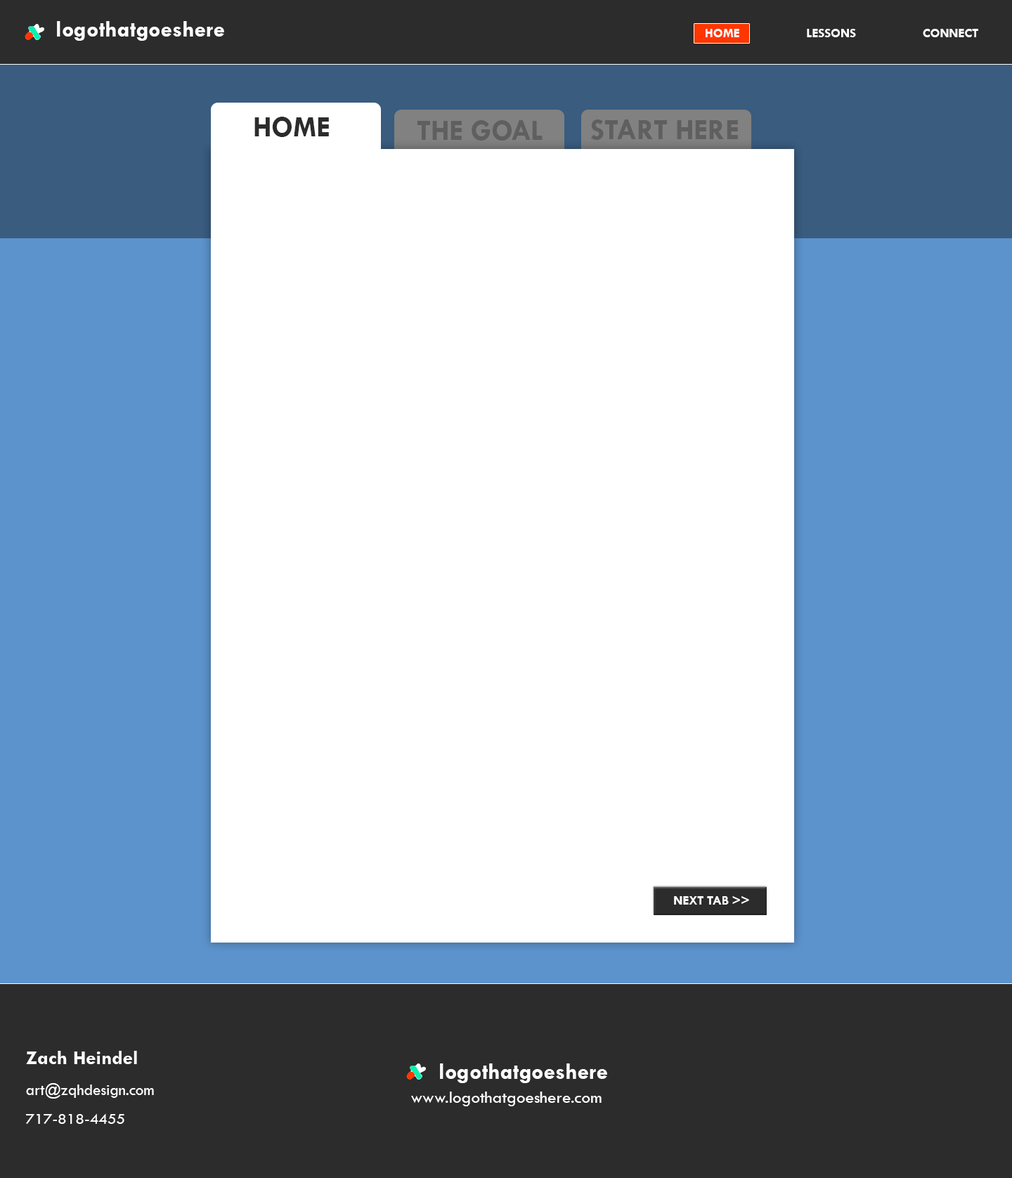
<style>
.page{position:relative;width:1012px;height:1178px;background:#ffffff}
.page>*{position:absolute;margin:0}
.t1{font:23.4px "TwCenMT-Bold";color:#ffffff}
.t2{font:13.2px "TwCenMT-Bold";color:#ffffff}
.t3{font:29.3px "TwCenMT-Bold";color:#2c2c2c}
.t4{font:29.3px "TwCenMT-Bold";color:#5f5f5f}
.t5{font:16.1px/30.8px "TwCenMT-Regular";color:#ffffff}
.t6{font:20.5px/30.8px "TwCenMT-Bold";color:#ffffff}
.t7{font:16.1px/29.3px "TwCenMT-Regular";color:#ffffff}
.t8{font:17.6px "TwCenMT-Regular";color:#ffffff}
</style>
<div class="page">
<p class="t1" style="left:57px;top:21px;width:167px;height:20px">logothatgoeshere</p>
<p class="t2" style="left:706px;top:29px;width:272px;height:8px">HOME                   LESSONS                   CONNECT</p>
<p class="t3" style="left:254px;top:117px;width:75px;height:20px">HOME</p>
<p class="t4" style="left:417px;top:120px;width:126px;height:21px">THE GOAL</p>
<p class="t4" style="left:590px;top:119px;width:148px;height:21px">START HERE</p>
<p class="t2" style="left:674px;top:896px;width:75px;height:9px">NEXT TAB &gt;&gt;</p>
<p class="t5" style="left:26px;top:1051px;width:128px;height:73px"><span class="t6">Zach Heindel<br></span>art@zqhdesign.com<br><span class="t7">717-818-4455</span></p>
<p class="t1" style="left:440px;top:1064px;width:167px;height:19px">logothatgoeshere</p>
<p class="t8" style="left:411px;top:1092px;width:191px;height:14px">www.logothatgoeshere.com</p>
</div>
